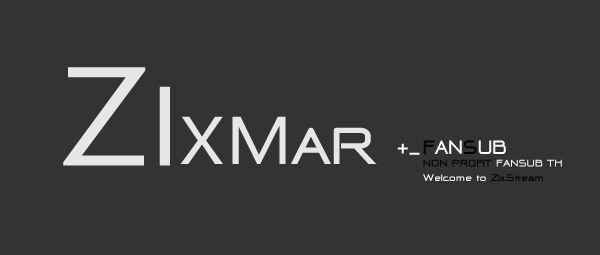
<style>
.page{position:relative;width:600px;height:255px;background:#333333}
.page>*{position:absolute;margin:0}
.t1{font:200px "ThaiSansLite";color:#e6e6e6;scale:1.11 1}
.t2{font:160px "ThaiSansLite";color:#e6e6e6;scale:1.11 1}
.t3{font:96px "ThaiSansLite";color:#e6e6e6;scale:1.11 1}
.t4{font:64px "-@-D-RCW2550v.2.00-";color:#e6e6e6;scale:1.11 1}
.t5{font:24px "-@-D-RCW2550v.2.00-";color:#ffffff}
.t6{font:24px "-@-D-RCW2550v.2.00-";color:#000000}
.t7{font:12px "-@-D-RCW2550v.2.00-";color:#ffffff;scale:1.11 1}
.t8{font:12px "-@-D-RCW2550v.2.00-";color:#000000;scale:1.11 1}
</style>
<div class="page">
<p class="t1" style="left:63px;top:67px;width:107px;height:99px">Z<span class="t2">I</span></p>
<p class="t3" style="left:180px;top:116px;width:197px;height:48px">XM<span class="t4">AR</span></p>
<p class="t5" style="left:397px;top:143px;width:23px;height:12px">+_</p>
<p class="t5" style="left:423px;top:140px;width:83px;height:14px"><span class="t6">F</span>AN<span class="t6">S</span>UB</p>
<p class="t7" style="left:423px;top:159px;width:139px;height:22px"><span class="t8">NON PROFIT</span> FANSUB TH<br>Welcome to <span class="t8">Zix.Stream</span></p>
</div>
